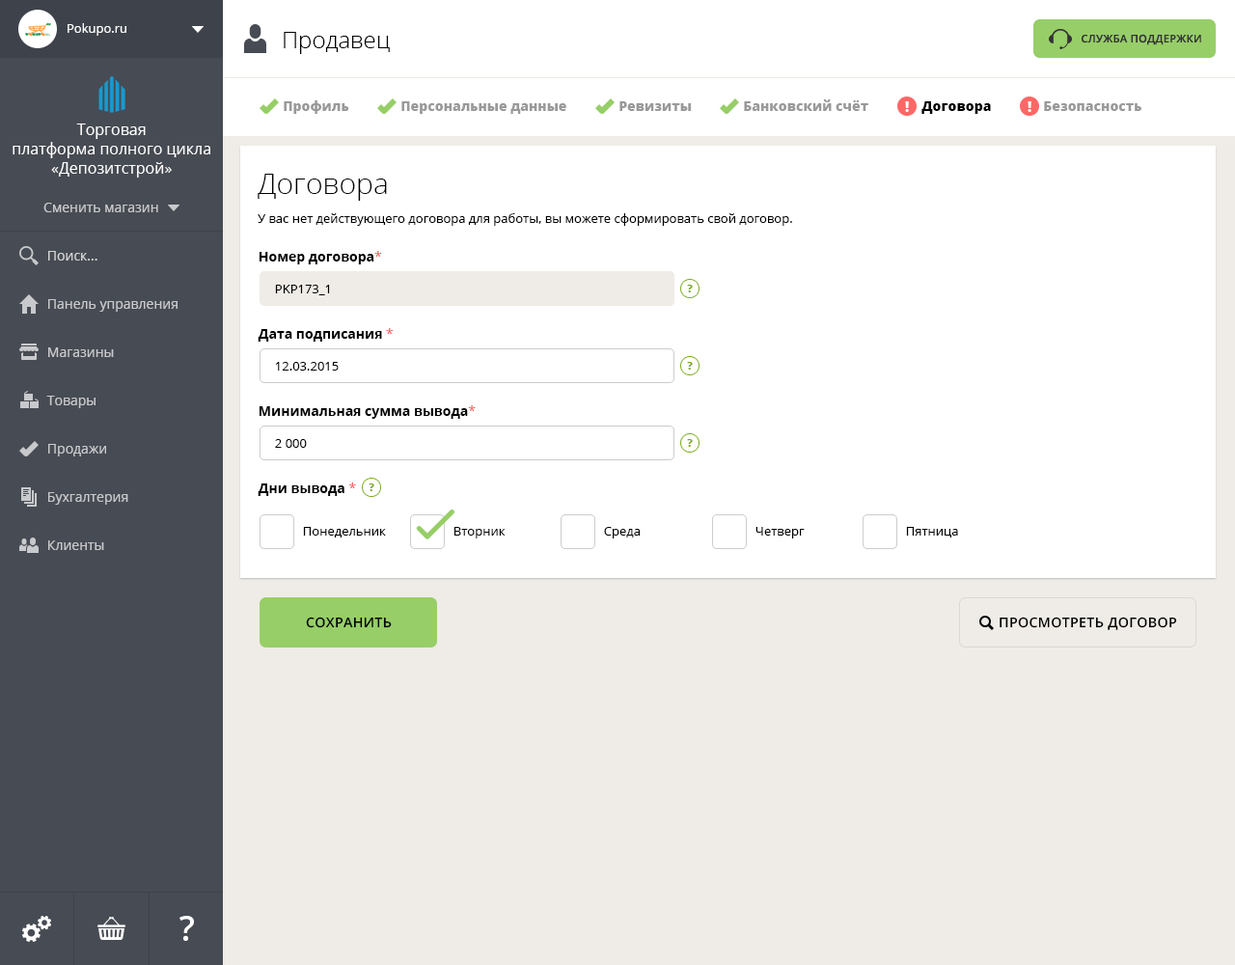
<style>
.page{position:relative;width:1235px;height:965px;background:#ffffff}
.page>*{position:absolute;margin:0}
.t1{font:12.5px "OpenSans";color:#ffffff}
.t2{font:23.2px "OpenSans-Light";color:#010101}
.t3{font:10.6px "OpenSans-Semibold";letter-spacing:0.025em;color:#333333;text-transform:uppercase}
.t4{font:13.5px "OpenSans-Extrabold";color:#999999}
.t5{font:13.5px "OpenSans-Extrabold";color:#000000}
.t6{font:15.4px/19.3px "OpenSans";color:#ffffff}
.t7{font:29px "OpenSans-Light";color:#000000}
.t8{font:13.5px "OpenSans";color:#c8c9cc}
.t9{font:12.5px "OpenSans";color:#000000}
.t10{font:13.5px "OpenSans";color:#d3d4d5}
.t11{font:13.5px "OpenSans-Bold";color:#000000}
.t12{font:13.5px "OpenSans";color:#fd5656}
.t13{font:10.6px "OpenSans-Extrabold";color:#7caa1f}
.t14{font:13.5px "OpenSans-Semibold";letter-spacing:0.025em;color:#000000;text-transform:uppercase}
</style>
<div class="page">
<p class="t1" style="left:68px;top:23px;width:58px;height:13px">Pokupo.ru</p>
<p class="t2" style="left:284px;top:32px;width:106px;height:22px">Продавец</p>
<p class="t3" style="left:1082px;top:34px;width:120px;height:11px">Служба поддержки</p>
<p class="t4" style="left:284px;top:100px;width:65px;height:14px">Профиль</p>
<p class="t4" style="left:402px;top:101px;width:165px;height:13px">Персональные данные</p>
<p class="t4" style="left:620px;top:101px;width:71px;height:10px">Ревизиты</p>
<p class="t4" style="left:744px;top:99px;width:125px;height:12px">Банковский счёт</p>
<p class="t5" style="left:922px;top:101px;width:69px;height:13px">Договора</p>
<p class="t4" style="left:1044px;top:101px;width:98px;height:10px">Безопасность</p>
<p class="t6" style="left:13px;top:124px;width:197px;height:54px;text-align:center">Торговая<br>платформа полного цикла<br>«Депозитстрой»</p>
<p class="t7" style="left:258px;top:174px;width:129px;height:27px">Договора</p>
<p class="t8" style="left:43px;top:203px;width:115px;height:9px">Сменить магазин</p>
<p class="t9" style="left:258px;top:213px;width:534px;height:13px">У вас нет действующего договора для работы, вы можете сформировать свой договор.</p>
<p class="t10" style="left:48px;top:251px;width:49px;height:10px">Поиск...</p>
<p class="t11" style="left:259px;top:251px;width:123px;height:13px">Номер договора<span class="t12">*</span></p>
<p class="t9" style="left:275px;top:285px;width:55px;height:10px">PKP173_1</p>
<p class="t13" style="left:687px;top:285px;width:6px;height:7px">?</p>
<p class="t8" style="left:48px;top:299px;width:130px;height:13px">Панель управления</p>
<p class="t11" style="left:258px;top:328px;width:136px;height:14px">Дата подписания <span class="t12">*</span></p>
<p class="t8" style="left:48px;top:347px;width:66px;height:10px">Магазины</p>
<p class="t9" style="left:275px;top:362px;width:64px;height:9px">12.03.2015</p>
<p class="t13" style="left:687px;top:362px;width:6px;height:8px">?</p>
<p class="t8" style="left:46px;top:396px;width:50px;height:12px">Товары</p>
<p class="t11" style="left:259px;top:405px;width:217px;height:14px">Минимальная сумма вывода<span class="t12">*</span></p>
<p class="t8" style="left:48px;top:444px;width:58px;height:13px">Продажи</p>
<p class="t9" style="left:275px;top:439px;width:32px;height:9px">2 000</p>
<p class="t13" style="left:687px;top:439px;width:6px;height:8px">?</p>
<p class="t11" style="left:258px;top:483px;width:98px;height:13px">Дни вывода <span class="t12">*</span></p>
<p class="t13" style="left:369px;top:484px;width:5px;height:7px">?</p>
<p class="t8" style="left:48px;top:492px;width:80px;height:13px">Бухгалтерия</p>
<p class="t9" style="left:303px;top:527px;width:83px;height:11px">Понедельник</p>
<p class="t9" style="left:454px;top:527px;width:52px;height:12px">Вторник</p>
<p class="t9" style="left:604px;top:527px;width:37px;height:12px">Среда</p>
<p class="t9" style="left:756px;top:527px;width:49px;height:12px">Четверг</p>
<p class="t9" style="left:906px;top:527px;width:52px;height:11px">Пятница</p>
<p class="t8" style="left:48px;top:541px;width:56px;height:9px">Клиенты</p>
<p class="t14" style="left:306px;top:617px;width:86px;height:11px">Сохранить</p>
<p class="t14" style="left:1000px;top:617px;width:178px;height:13px">Просмотреть договор</p>
</div>
